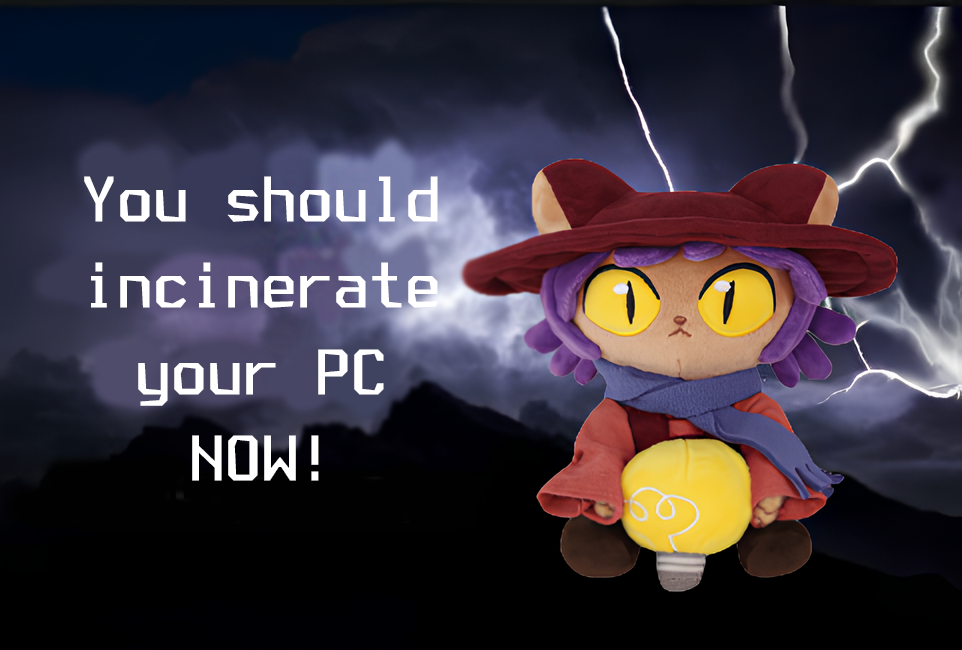
<style>
.page{position:relative;width:962px;height:650px}
.page>*{position:absolute;margin:0}
.t1{font:72px "TerminusTTF-Bold";color:#ffffff}
</style>
<div class="page">
<p class="t1" style="left:84px;top:176px;width:354px;height:305px;text-align:center">You should incinerate your PC <br>NOW!</p>
</div>
